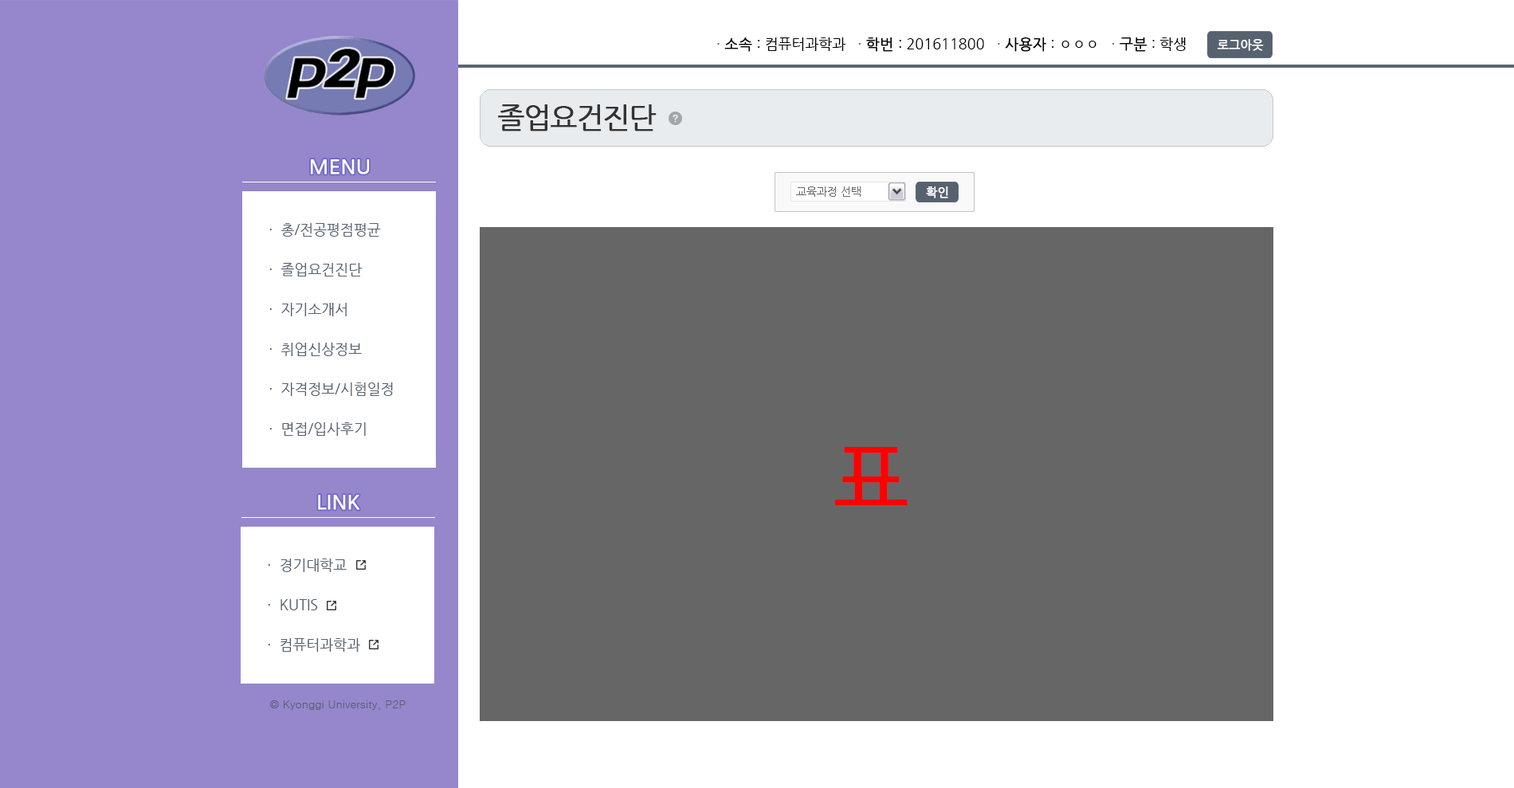
<style>
.page{position:relative;width:1514px;height:788px;background:#ffffff}
.page>*{position:absolute;margin:0}
.t1{font:14.3px "NanumGothic";color:#000000}
.t2{font:14.3px "NanumGothic";color:#566270}
.t3{font:14.3px "NanumGothic";color:#000000;font-weight:bold}
.t4{font:11.9px "NanumGothic";color:#ffffff;font-weight:bold}
.t5{font:28.7px "NanumGothic";letter-spacing:-0.05em;color:#333333;font-weight:bold}
.t6{font:19.9px "NanumGothic";color:#ffffff;font-weight:bold}
.t7{font:11.2px "NanumGothic";color:#666666}
.t8{font:14.3px/39.8px "NanumGothic";color:#566270}
.t9{font:79.7px "NanumGothic";letter-spacing:-0.05em;color:#ff0000;font-weight:bold}
.t10{font:11.2px "Dotum";color:#566270}
</style>
<div class="page">
<p class="t1" style="left:717px;top:37px;width:468px;height:15px"><span class="t2">· </span><span class="t3">소속</span> : 컴퓨터과학과   <span class="t2">· </span><span class="t3">학번 </span>: 201611800   <span class="t2">· </span><span class="t3">사용자</span> : ㅇㅇㅇ   <span class="t2">· </span><span class="t3">구분</span> : 학생</p>
<p class="t4" style="left:1216px;top:39px;width:47px;height:12px">로그아웃</p>
<p class="t5" style="left:498px;top:104px;width:158px;height:27px">졸업요건진단</p>
<p class="t6" style="left:311px;top:159px;width:59px;height:15px">MENU</p>
<p class="t7" style="left:796px;top:186px;width:64px;height:11px">교육과정 선택</p>
<p class="t4" style="left:926px;top:186px;width:22px;height:12px">확인</p>
<p class="t8" style="left:269px;top:223px;width:124px;height:213px">·  총/전공평점평균<br>·  졸업요건진단<br>·  자기소개서<br>·  취업신상정보<br>·  자격정보/시험일정<br>·  면접/입사후기</p>
<p class="t9" style="left:835px;top:447px;width:72px;height:59px">표</p>
<p class="t6" style="left:318px;top:495px;width:41px;height:15px">LINK</p>
<p class="t8" style="left:268px;top:558px;width:92px;height:94px">·  경기대학교<br>·  KUTIS<br>·  컴퓨터과학과</p>
<p class="t10" style="left:270px;top:700px;width:135px;height:10px">© Kyonggi University, P2P</p>
</div>
